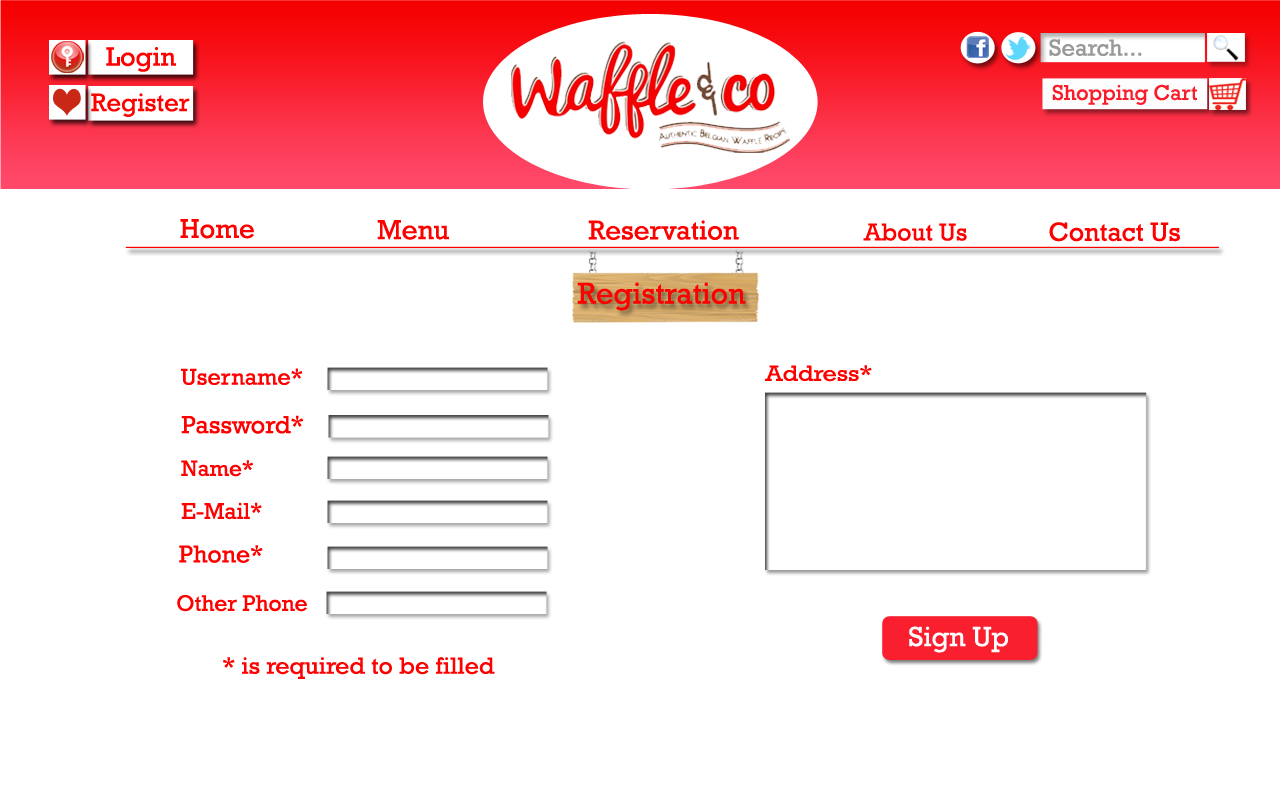
<style>
.page{position:relative;width:1280px;height:800px;background:#ffffff}
.page>*{position:absolute;margin:0}
.t1{font:27.5px "Rockwell";color:#fe0000}
.t2{font:28px "Rockwell";color:#fe0000}
.t3{font:27.6px "Rockwell";color:#fe0000}
.t4{font:26.7px "Rockwell";color:#fe0000}
.t5{font:24.9px "Rockwell";color:#fe0000}
.t6{font:30.4px "Rockwell";color:#fe0000}
.t7{font:22.2px "Rockwell";color:#fe0000;scale:1.12 1}
.t8{font:23.4px "Rockwell";color:#fe0000}
.t9{font:25.3px "Rockwell";color:#fe0000}
.t10{font:22.5px "Rockwell";color:#fe0000}
.t11{font:23.2px "Rockwell";color:#fe0000}
.t12{font:22.7px "Rockwell";color:#fe0000}
.t13{font:28.2px "Rockwell";color:#ffffff}
.t14{font:23.8px "Rockwell";color:#fe0000;scale:1.04 1}
</style>
<div class="page">
<p class="t1" style="left:180px;top:219px;width:74px;height:20px">Home</p>
<p class="t2" style="left:377px;top:220px;width:72px;height:20px">Menu</p>
<p class="t3" style="left:588px;top:220px;width:151px;height:20px">Reservation</p>
<p class="t4" style="left:1049px;top:222px;width:131px;height:20px">Contact Us</p>
<p class="t5" style="left:863px;top:223px;width:104px;height:18px">About Us</p>
<p class="t6" style="left:577px;top:282px;width:169px;height:29px">Registration</p>
<p class="t7" style="left:765px;top:365px;width:107px;height:17px">Address*</p>
<p class="t8" style="left:181px;top:368px;width:122px;height:17px">Username*</p>
<p class="t9" style="left:181px;top:415px;width:122px;height:19px">Password*</p>
<p class="t10" style="left:181px;top:460px;width:72px;height:17px">Name*</p>
<p class="t11" style="left:181px;top:502px;width:81px;height:18px">E-Mail*</p>
<p class="t5" style="left:179px;top:545px;width:84px;height:18px">Phone*</p>
<p class="t12" style="left:177px;top:595px;width:130px;height:17px">Other Phone</p>
<p class="t13" style="left:909px;top:626px;width:99px;height:27px">Sign Up</p>
<p class="t14" style="left:223px;top:657px;width:272px;height:22px">* is required to be filled</p>
</div>
